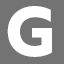
<style>
.page{position:relative;width:64px;height:64px;background:#737373}
.page>*{position:absolute;margin:0}
.t1{font:68.7px "Rustica-Bold";color:#ffffff}
</style>
<div class="page">
<p class="t1" style="left:7px;top:6px;width:45px;height:51px">G</p>
</div>
